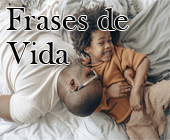
<style>
.page{position:relative;width:170px;height:140px}
.page>*{position:absolute;margin:0}
.t1{font:33.3px "BaskOldFace";color:#040404}
</style>
<div class="page">
<p class="t1" style="left:6px;top:8px;width:122px;height:22px">Frases de</p>
<p class="t1" style="left:6px;top:42px;width:64px;height:22px">Vida</p>
</div>
